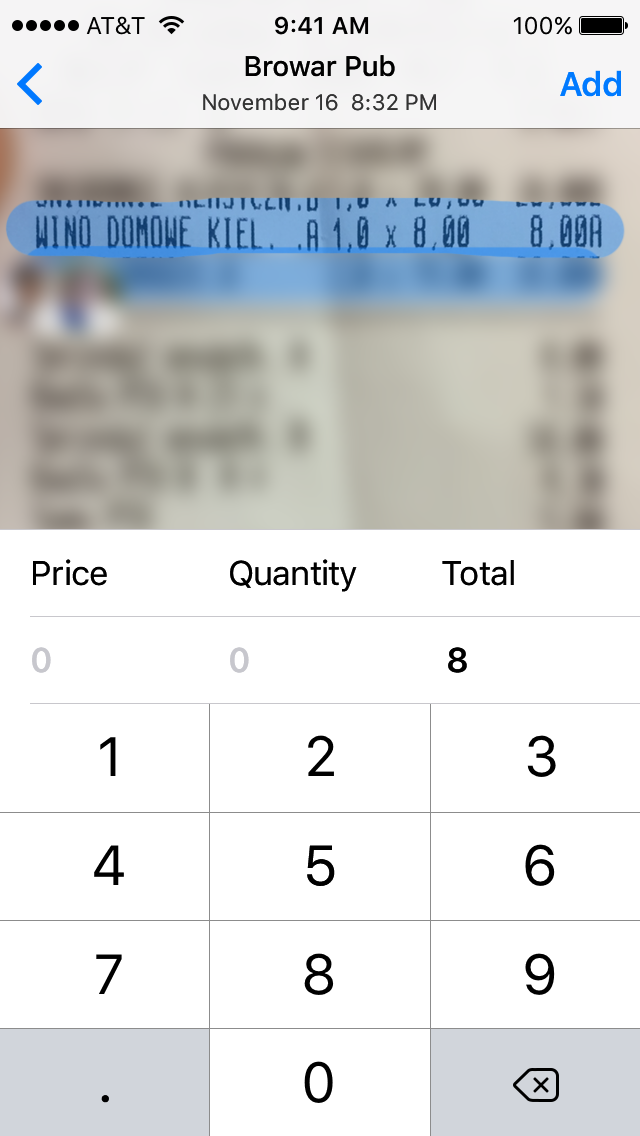
<style>
.page{position:relative;width:640px;height:1136px;background:#ffffff}
.page>*{position:absolute;margin:0}
.t1{font:28px "SFUIText-Medium";letter-spacing:-0.01em;color:#000000}
.t2{font:34px "SFUIText-Semibold";letter-spacing:-0.025em;color:#007aff}
.t3{font:22px "SFUIText-Regular";color:#333333}
.t4{font:34px "SFUIText-Regular";letter-spacing:-0.025em;color:#000000}
.t5{font:34px "SFUIText-Semibold";letter-spacing:-0.025em;color:#c7c7cd}
.t6{font:34px "SFUIText-Semibold";letter-spacing:-0.025em;color:#000000}
.t7{font:55px "SFUIText-Regular";color:#000000}
.t8{font:56px "SFUIText-Regular";color:#000000}
</style>
<div class="page">
<p class="t1" style="left:245px;top:55px;width:150px;height:22px">Browar Pub</p>
<p class="t2" style="left:560px;top:70px;width:61px;height:27px">Add</p>
<p class="t3" style="left:203px;top:93px;width:233px;height:18px">November 16  8:32 PM</p>
<p class="t4" style="left:33px;top:559px;width:74px;height:27px">Price</p>
<p class="t4" style="left:230px;top:559px;width:127px;height:33px">Quantity</p>
<p class="t4" style="left:442px;top:560px;width:72px;height:26px">Total</p>
<p class="t5" style="left:32px;top:647px;width:19px;height:26px">0</p>
<p class="t5" style="left:230px;top:647px;width:19px;height:26px">0</p>
<p class="t6" style="left:448px;top:647px;width:19px;height:26px">8</p>
<p class="t7" style="left:100px;top:737px;width:16px;height:39px">1</p>
<p class="t8" style="left:308px;top:735px;width:26px;height:41px">2</p>
<p class="t8" style="left:527px;top:735px;width:29px;height:42px">3</p>
<p class="t8" style="left:94px;top:845px;width:30px;height:40px">4</p>
<p class="t8" style="left:307px;top:845px;width:28px;height:41px">5</p>
<p class="t8" style="left:525px;top:844px;width:30px;height:42px">6</p>
<p class="t8" style="left:304px;top:953px;width:30px;height:42px">8</p>
<p class="t8" style="left:525px;top:953px;width:30px;height:42px">9</p>
<p class="t8" style="left:96px;top:954px;width:26px;height:40px">7</p>
<p class="t8" style="left:304px;top:1061px;width:29px;height:42px">0</p>
<p class="t8" style="left:101px;top:1095px;width:8px;height:8px">.</p>
</div>
